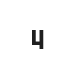
<style>
.page{position:relative;width:74px;height:74px;background:#ffffff}
.page>*{position:absolute;margin:0}
.t1{font:30px "04b24";color:#1f1f1f}
</style>
<div class="page">
<p class="t1" style="left:32px;top:30px;width:12px;height:19px">4</p>
</div>
